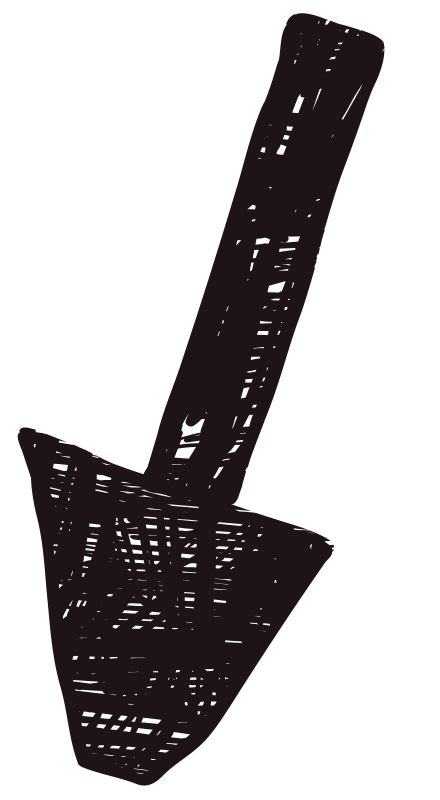
<style>
.page{position:relative;width:440px;height:800px;background:#ffffff}
.page>*{position:absolute;margin:0}
.t1{font:692.6px "Chalkboard52-2-Regular";letter-spacing:-0.005em;color:#1e1318;scale:1.26 1}
.t2{font:424.5px "Chalkboard52-2-Regular";letter-spacing:-0.005em;color:#1e1318;scale:2.09 1}
</style>
<div class="page">
<p class="t1" style="left:140px;top:13px;width:245px;height:493px;rotate:12deg">I</p>
<p class="t2" style="left:17px;top:427px;width:317px;height:359px;rotate:22deg">V</p>
</div>
